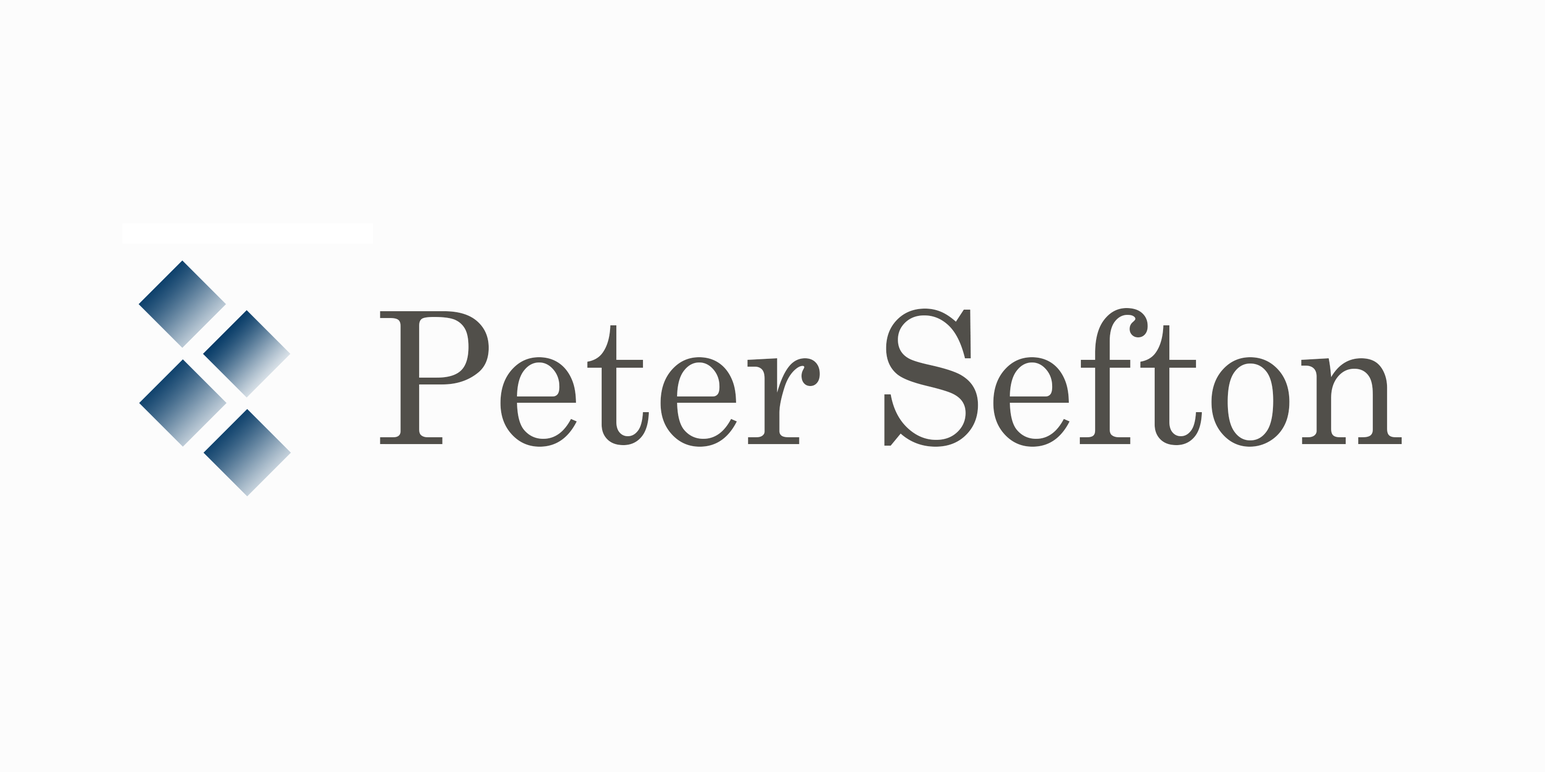
<style>
.page{position:relative;width:1545px;height:772px;background:#fcfcfc}
.page>*{position:absolute;margin:0}
.t1{font:183.9px "Century";color:#514f4a}
</style>
<div class="page">
<p class="t1" style="left:380px;top:308px;width:1022px;height:139px">Peter Sefton</p>
</div>
